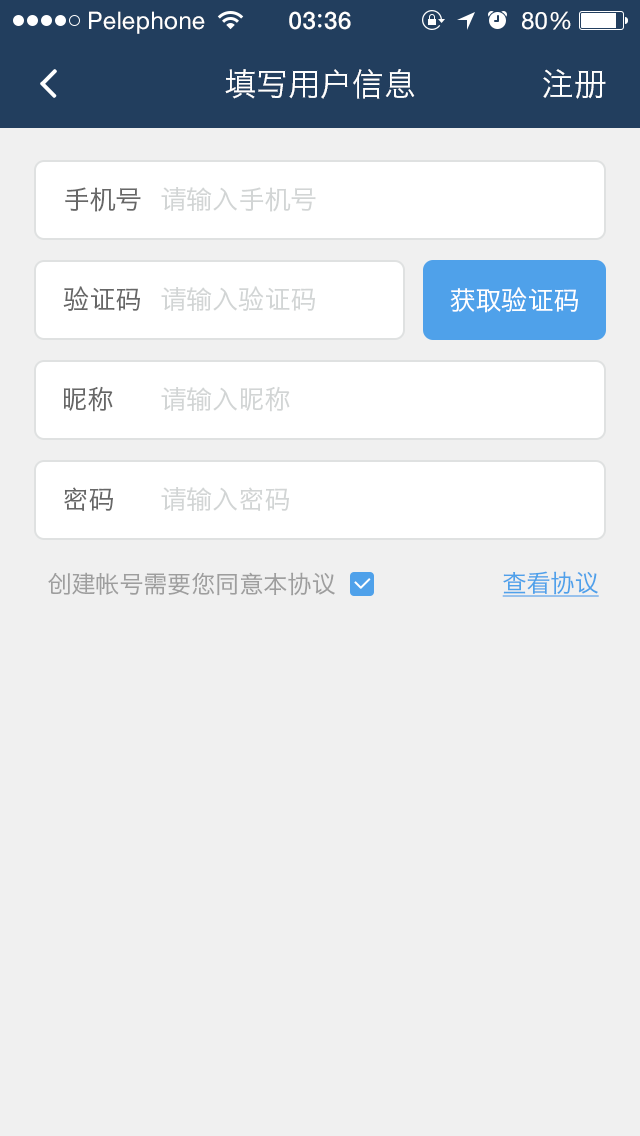
<style>
.page{position:relative;width:640px;height:1136px;background:#f0f0f0}
.page>*{position:absolute;margin:0}
.t1{font:24px "HelveticaNeue";letter-spacing:0.02em;color:#ffffff}
.t2{font:24px "HelveticaNeue-Medium";letter-spacing:0.03em;color:#ffffff}
.t3{font:32px "HiraginoSansGB-W3";color:#ffffff}
.t4{font:26px "HiraginoSansGB-W3";color:#676767}
.t5{font:26px "HiraginoSansGB-W3";color:#d2d5d5}
.t6{font:26px "HiraginoSansGB-W3";color:#ffffff}
.t7{font:24px "HiraginoSansGB-W3";color:#9e9e9e}
.t8{font:24px "HiraginoSansGB-W3";color:#4fa1ea;text-decoration:underline}
</style>
<div class="page">
<p class="t1" style="left:89px;top:11px;width:116px;height:23px">Pelephone</p>
<p class="t2" style="left:289px;top:11px;width:62px;height:19px">03 36</p>
<p class="t1" style="left:522px;top:11px;width:49px;height:19px">80%</p>
<p class="t3" style="left:225px;top:69px;width:190px;height:30px">填写用户信息</p>
<p class="t3" style="left:543px;top:69px;width:63px;height:30px">注册</p>
<p class="t4" style="left:65px;top:187px;width:76px;height:25px">手机号</p>
<p class="t5" style="left:161px;top:187px;width:155px;height:25px">请输入手机号</p>
<p class="t4" style="left:63px;top:286px;width:77px;height:25px">验证码</p>
<p class="t5" style="left:161px;top:286px;width:154px;height:25px">请输入验证码</p>
<p class="t6" style="left:450px;top:287px;width:128px;height:26px">获取验证码</p>
<p class="t4" style="left:63px;top:386px;width:50px;height:26px">昵称</p>
<p class="t5" style="left:161px;top:386px;width:129px;height:26px">请输入昵称</p>
<p class="t4" style="left:64px;top:487px;width:49px;height:24px">密码</p>
<p class="t5" style="left:161px;top:487px;width:128px;height:24px">请输入密码</p>
<p class="t7" style="left:48px;top:572px;width:287px;height:24px">创建帐号需要您同意本协议</p>
<p class="t8" style="left:502px;top:571px;width:97px;height:26px">查看协议</p>
</div>
